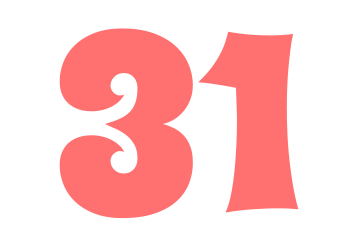
<style>
.page{position:relative;width:354px;height:236px;background:#ffffff}
.page>*{position:absolute;margin:0}
.t1{font:250px "SpicyRice-Regular";color:#ff7171}
</style>
<div class="page">
<p class="t1" style="left:59px;top:28px;width:240px;height:191px">31</p>
</div>
